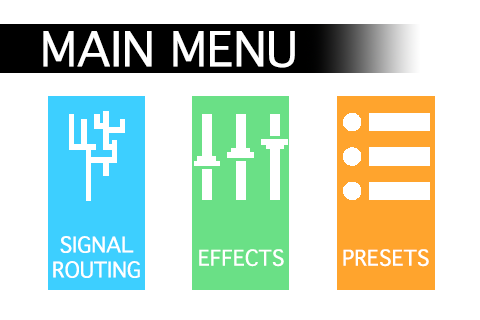
<style>
.page{position:relative;width:480px;height:320px;background:#ffffff}
.page>*{position:absolute;margin:0}
.t1{font:46.4px "Thonburi";color:#ffffff}
.t2{font:20.8px "Thonburi";color:#ffffff}
</style>
<div class="page">
<p class="t1" style="left:43px;top:31px;width:252px;height:37px">MAIN MENU</p>
<p class="t2" style="left:53px;top:236px;width:87px;height:42px;text-align:center">SIGNAL<br>ROUTING</p>
<p class="t2" style="left:199px;top:249px;width:85px;height:18px">EFFECTS</p>
<p class="t2" style="left:343px;top:249px;width:86px;height:18px">PRESETS</p>
</div>
